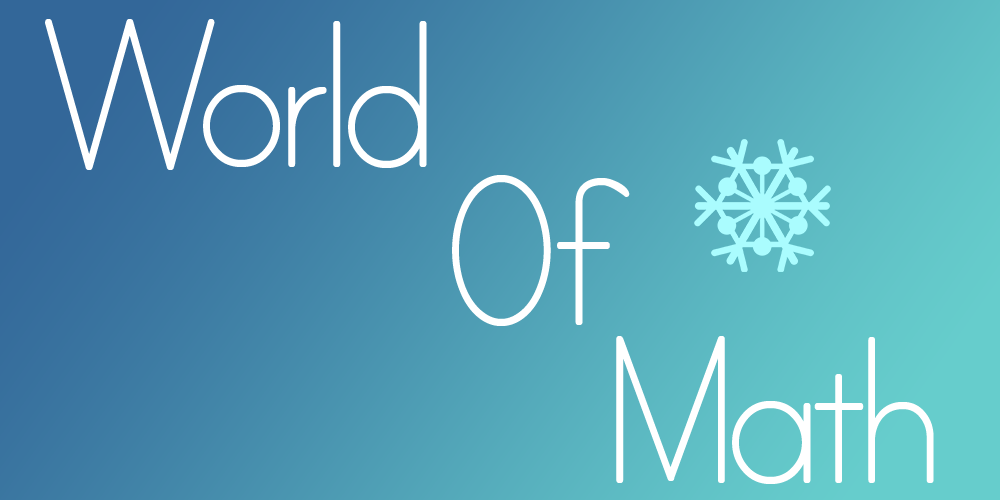
<style>
.page{position:relative;width:1000px;height:500px}
.page>*{position:absolute;margin:0}
.t1{font:237.5px/158.3px "PrintClearly";letter-spacing:-0.1em;color:#ffffff}
</style>
<div class="page">
<p class="t1" style="left:45px;top:19px;width:889px;height:465px;text-align:center">World<br>             Of<br>                       Math</p>
</div>
